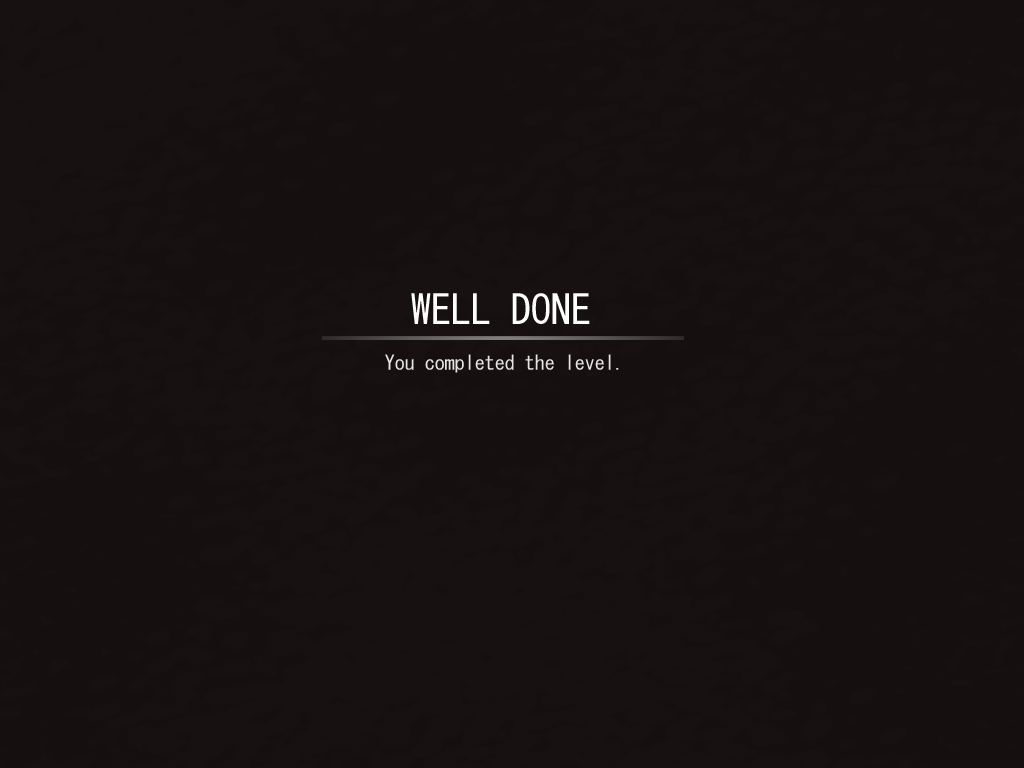
<style>
.page{position:relative;width:1024px;height:768px;background:#150f0f}
.page>*{position:absolute;margin:0}
.t1{font:40px "MS-Gothic";color:#ffffff}
.t2{font:20px "MS-Gothic";color:#e6e6e6}
</style>
<div class="page">
<p class="t1" style="left:411px;top:293px;width:179px;height:31px">WELL DONE</p>
<p class="t2" style="left:385px;top:354px;width:234px;height:19px">You completed the level.</p>
</div>
